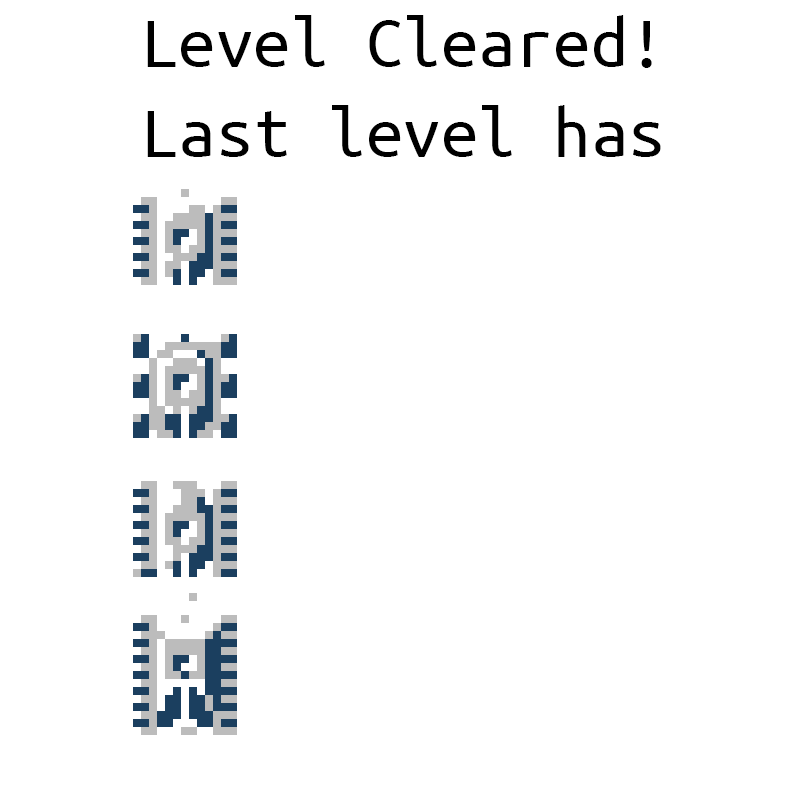
<style>
.page{position:relative;width:800px;height:800px;background:#ffffff}
.page>*{position:absolute;margin:0}
.t1{font:75px "UbuntuMono-Regular";color:#000000}
</style>
<div class="page">
<p class="t1" style="left:147px;top:15px;width:514px;height:142px;text-align:center">Level Cleared!<br>Last level has</p>
</div>
